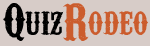
<style>
.page{position:relative;width:150px;height:46px;background:#d7ccc8}
.page>*{position:absolute;margin:0}
.t1{font:40.4px "CarnivaleeFreakshow";color:#cb5c2d}
.t2{font:50.5px "CarnivaleeFreakshow";color:#000000}
.t3{font:40.4px "CarnivaleeFreakshow";color:#000000}
.t4{font:50.5px "CarnivaleeFreakshow";color:#cb5c2d}
</style>
<div class="page">
<p class="t1" style="left:3px;top:3px;width:145px;height:38px"><span class="t2">Q</span><span class="t3">uiz</span><span class="t4">R</span>odeo</p>
</div>
